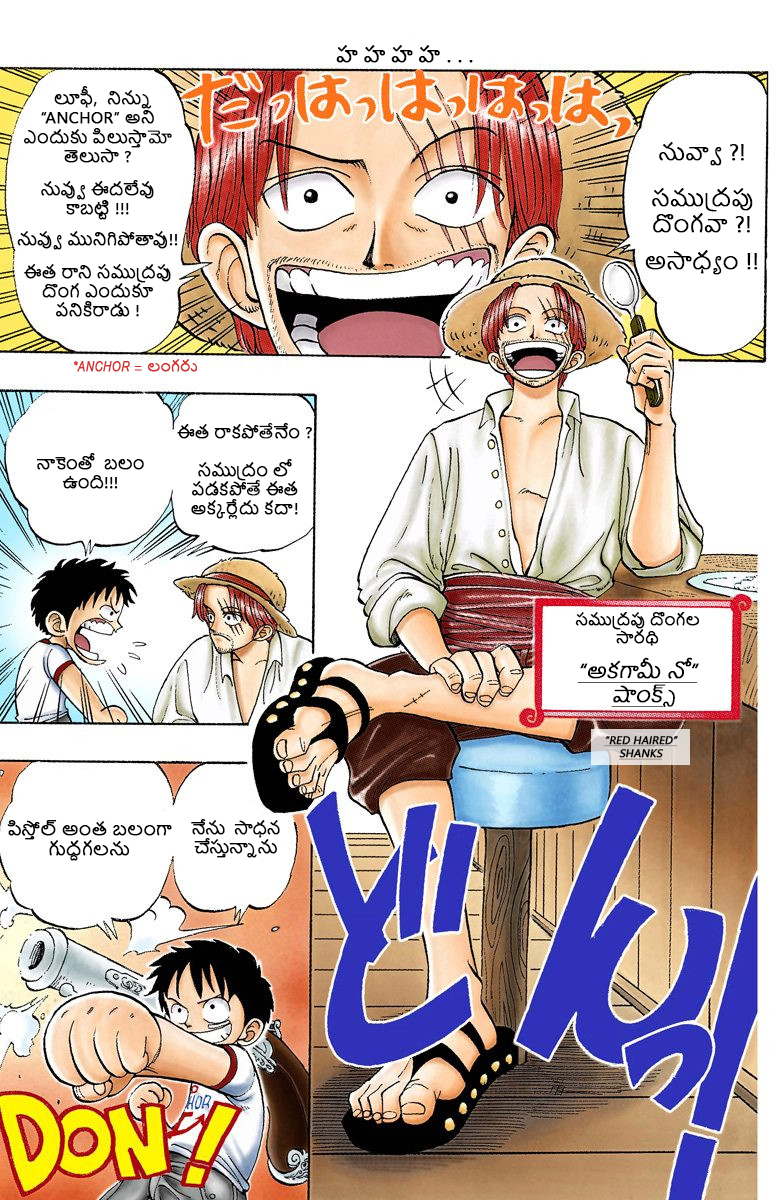
<style>
.page{position:relative;width:780px;height:1200px;background:#ffffff}
.page>*{position:absolute;margin:0}
.t1{font:20.1px "NirmalaUI";color:#000000;font-weight:bold}
.t2{font:16.1px "NirmalaUI";color:#000000;font-weight:bold}
.t3{font:9.9px "NirmalaUI";color:#000000;font-weight:bold}
.t4{font:21.8px "NirmalaUI";color:#000000;font-weight:bold}
.t5{font:14.1px "ArialNarrow-Italic";color:#cf3434;font-weight:bold}
.t6{font:14.1px "NirmalaUI-Semilight";color:#cf3434;font-weight:bold}
.t7{font:15.9px "NirmalaUI";color:#000000;font-weight:bold}
.t8{font:15.6px "NirmalaUI";color:#000000;font-weight:bold}
.t9{font:15px "NirmalaUI";color:#000000;font-weight:bold}
.t10{font:20.1px "NirmalaUI";color:#000000;font-weight:bold;font-style:italic;text-decoration:underline}
.t11{font:11px "NirmalaUI";color:#000000;font-weight:bold;font-style:italic;text-decoration:underline}
.t12{font:16.9px "NirmalaUI";color:#000000;font-weight:bold}
</style>
<div class="page">
<p class="t1" style="left:336px;top:45px;width:137px;height:18px">హ హ హ హ . . .</p>
<p class="t2" style="left:17px;top:86px;width:161px;height:231px;text-align:center">లూఫీ,  నిన్ను “ANCHOR” అని ఎందుకు పిలుస్తామో తెలుసా ?<br><br>నువ్వు ఈదలేవు కాబట్టి !!!<span class="t3"><br><br></span>నువ్వు మునిగిపోతావు!! <br><br>ఈత రాని సముద్రపు దొంగ ఎందుకూ  పనికిరాడు !</p>
<p class="t4" style="left:645px;top:142px;width:113px;height:133px;text-align:center">నువ్వా ?!<br><br>సముద్రపు దొంగవా ?!<br> <br>అసాధ్యం !!</p>
<p class="t5" style="left:74px;top:359px;width:124px;height:13px">*ANCHOR <span class="t6">= లంగరు</span></p>
<p class="t7" style="left:177px;top:422px;width:135px;height:97px;text-align:center">ఈత రాకపోతేనేం ?<br><br>సముద్రం లో పడకపోతే ఈత అక్కర్లేదు కదా!</p>
<p class="t8" style="left:36px;top:453px;width:108px;height:36px;text-align:center">నాకెంతో  బలం ఉంది!!!</p>
<p class="t9" style="left:575px;top:612px;width:125px;height:95px;text-align:center">సముద్రపు దొంగల <br>సారథి<br><br><span class="t10">“అకగామీ నో”<br>షాంక్స్</span></p>
<p class="t11" style="left:604px;top:736px;width:74px;height:24px;text-align:center">“RED HAIRED”<br>SHANKS</p>
<p class="t12" style="left:7px;top:820px;width:165px;height:41px;text-align:center">పిస్తోల్ అంత బలంగా గుద్దగలను</p>
<p class="t8" style="left:191px;top:819px;width:89px;height:39px;text-align:center">నేను  సాధన  చేస్తున్నాను</p>
</div>
